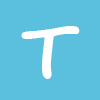
<style>
.page{position:relative;width:100px;height:100px;background:#5bc0de}
.page>*{position:absolute;margin:0}
.t1{font:75px "SegoeScript-Bold";color:#ffffff}
</style>
<div class="page">
<p class="t1" style="left:21px;top:26px;width:59px;height:53px">T</p>
</div>
